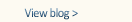
<style>
.page{position:relative;width:132px;height:22px;background:#fdfaf2}
.page>*{position:absolute;margin:0}
.t1{font:13px "Calibri";letter-spacing:-0.04em;scale:0.94 1}
</style>
<div class="page">
<p class="t1" style="left:24px;top:8px;width:46px;height:12px">View blog</p>
<p class="t1" style="left:72px;top:10px;width:6px;height:7px">&gt;</p>
</div>
